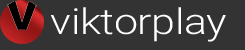
<style>
.page{position:relative;width:245px;height:50px;background:#333333}
.page>*{position:absolute;margin:0}
.t1{font:35.7px "Roboto-Light";letter-spacing:-0.01em;color:#ffffff;scale:1.2 1}
</style>
<div class="page">
<p class="t1" style="left:50px;top:7px;width:176px;height:35px">viktorplay</p>
</div>
